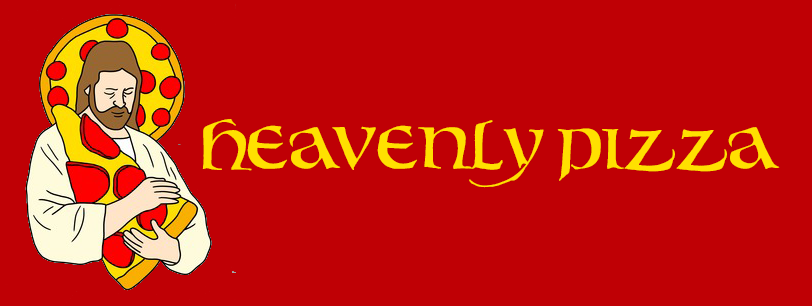
<style>
.page{position:relative;width:812px;height:306px;background:#bf0005}
.page>*{position:absolute;margin:0}
.t1{font:60px "bouwsunc";color:#ffe000}
.t2{font:60px "bouwsunc";letter-spacing:-0.14em;color:#ffe000}
</style>
<div class="page">
<p class="t1" style="left:202px;top:119px;width:578px;height:69px">He<span class="t2">a</span>venly Pizza</p>
</div>
